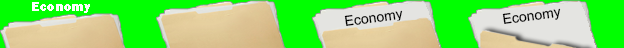
<style>
.page{position:relative;width:624px;height:48px;background:#00ff00}
.page>*{position:absolute;margin:0}
.t1{font:14px "FranklinGothic-Heavy";color:#ffffff}
.t2{font:14px "ArialMT";color:#000000}
</style>
<div class="page">
<p class="t1" style="left:32px;top:2px;width:58px;height:11px">Economy</p>
<p class="t2" style="left:344px;top:10px;width:59px;height:16px;rotate:-8deg">Economy</p>
<p class="t2" style="left:502px;top:8px;width:59px;height:16px;rotate:-8deg">Economy</p>
</div>
